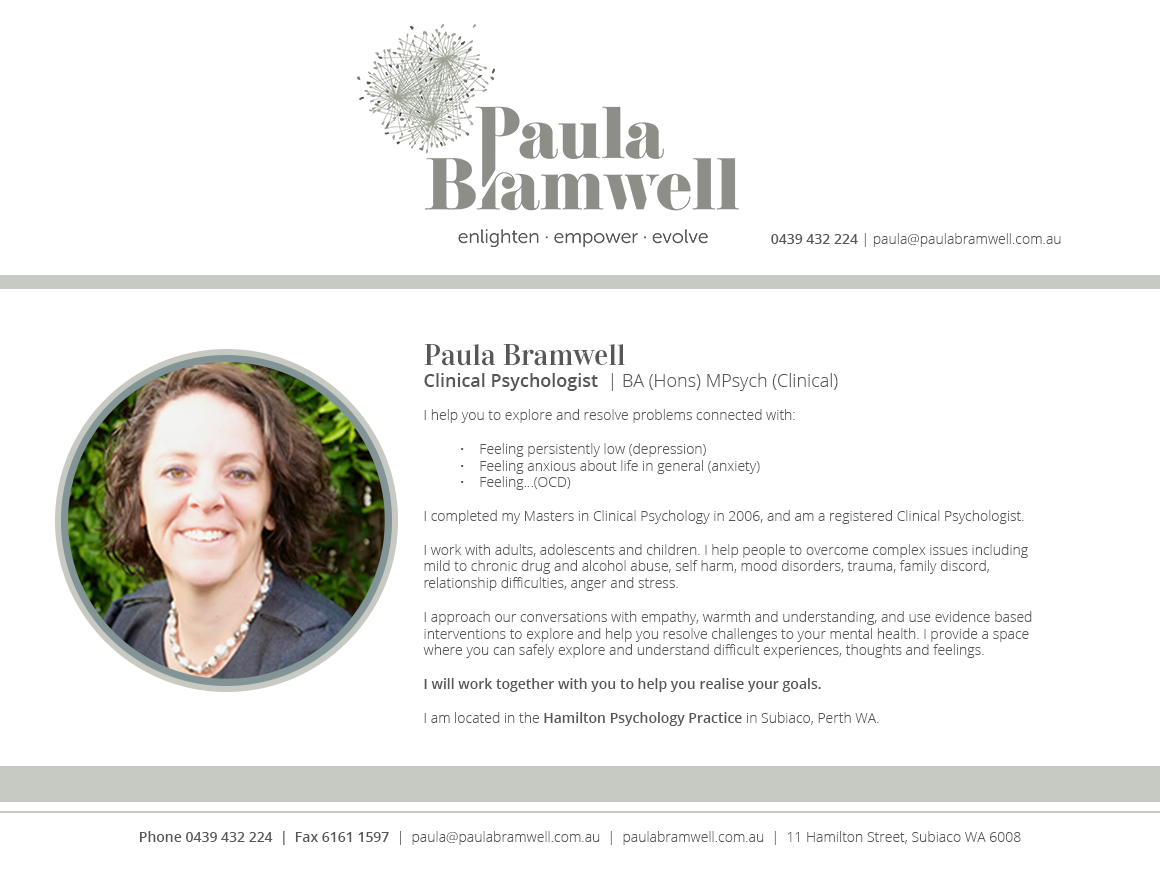
<style>
.page{position:relative;width:1160px;height:876px;background:#ffffff}
.page>*{position:absolute;margin:0}
.t1{font:14px "OpenSans-Light";color:#575756}
.t2{font:14px "OpenSans-Semibold";color:#575756}
.t3{font:30px "Vidaloka-Regular";color:#575756}
.t4{font:18px "OpenSans-Semibold";color:#575756}
.t5{font:18px "OpenSans-Light";color:#575756}
</style>
<div class="page">
<p class="t1" style="left:771px;top:233px;width:290px;height:14px"><span class="t2">0439 432 224 </span>| paula@paulabramwell.com.au</p>
<p class="t1" style="left:423px;top:344px;width:609px;height:382px"><span class="t3">Paula Bramwell <br></span><span class="t4">Clinical Psychologist</span><span class="t5">  | BA (Hons) MPsych (Clinical)<br></span><br>I help you to explore and resolve problems connected with:<br><br> •    Feeling persistently low (depression)<br> •    Feeling anxious about life in general (anxiety)<br> •    Feeling…(OCD)<br><br>I completed my Masters in Clinical Psychology in 2006, and am a registered Clinical Psychologist.<br><br>I work with adults, adolescents and children. I help people to overcome complex issues including mild to chronic drug and alcohol abuse, self harm, mood disorders, trauma, family discord, <br>relationship difficulties, anger and stress.<br><br>I approach our conversations with empathy, warmth and understanding, and use evidence based <br>interventions to explore and help you resolve challenges to your mental health. I provide a space where you can safely explore and understand difficult experiences, thoughts and feelings. <br><span class="t2"><br>I will work together with you to help you realise your goals.<br></span><br>I am located in the <span class="t2">Hamilton Psychology Practice </span>in Subiaco, Perth WA.</p>
<p class="t1" style="left:139px;top:831px;width:882px;height:14px"><span class="t2">Phone 0439 432 224  |  Fax 6161 1597</span>  |  paula@paulabramwell.com.au  |  paulabramwell.com.au  |  11 Hamilton Street, Subiaco WA 6008</p>
</div>
